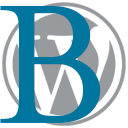
<style>
.page{position:relative;width:128px;height:128px;background:#ffffff}
.page>*{position:absolute;margin:0}
.t1{font:195px "MrsEavesOT-Roman";color:#00769e}
</style>
<div class="page">
<p class="t1" style="left:0px;top:5px;width:101px;height:118px">B</p>
</div>
